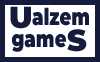
<style>
.page{position:relative;width:100px;height:62px;background:#141b3d}
.page>*{position:absolute;margin:0}
.t1{font:30px "Montserrat-Black";color:#141b3d}
.t2{font:23.4px "Montserrat-Black";color:#141b3d;scale:0.77 1}
</style>
<div class="page">
<p class="t1" style="left:10px;top:6px;width:21px;height:23px">U</p>
<p class="t2" style="left:32px;top:7px;width:57px;height:19px">alzem</p>
<p class="t1" style="left:67px;top:29px;width:20px;height:23px">S</p>
<p class="t2" style="left:12px;top:34px;width:55px;height:18px">game</p>
</div>
